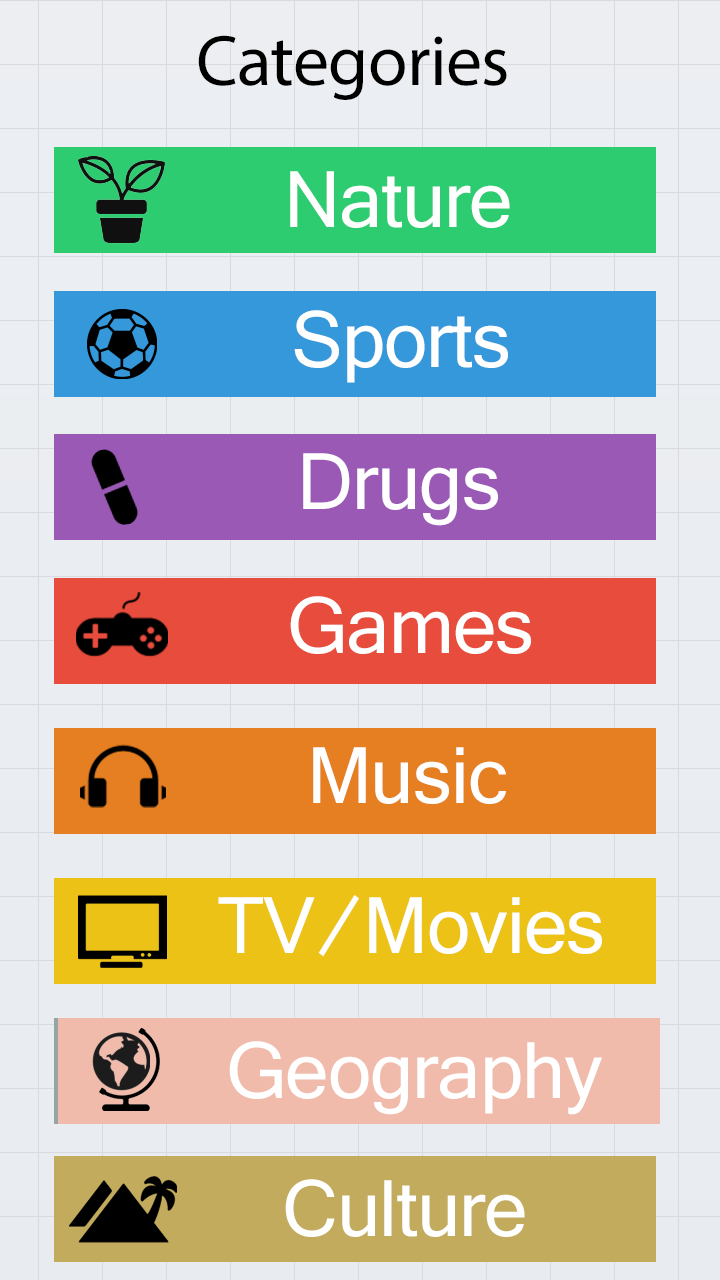
<style>
.page{position:relative;width:720px;height:1280px}
.page>*{position:absolute;margin:0}
.t1{font:72px "MyriadPro-Regular";letter-spacing:-0.01em;color:#000000}
.t2{font:100px "Tunga";letter-spacing:-0.01em;color:#ffffff}
</style>
<div class="page">
<p class="t1" style="left:198px;top:35px;width:309px;height:65px">Categories</p>
<p class="t2" style="left:290px;top:171px;width:220px;height:57px">Nature</p>
<p class="t2" style="left:294px;top:310px;width:214px;height:73px">Sports</p>
<p class="t2" style="left:303px;top:453px;width:195px;height:73px">Drugs</p>
<p class="t2" style="left:290px;top:596px;width:241px;height:58px">Games</p>
<p class="t2" style="left:313px;top:747px;width:193px;height:57px">Music</p>
<p class="t2" style="left:218px;top:895px;width:384px;height:62px">TV/Movies</p>
<p class="t2" style="left:229px;top:1041px;width:373px;height:74px">Geography</p>
<p class="t2" style="left:285px;top:1179px;width:240px;height:58px">Culture</p>
</div>
